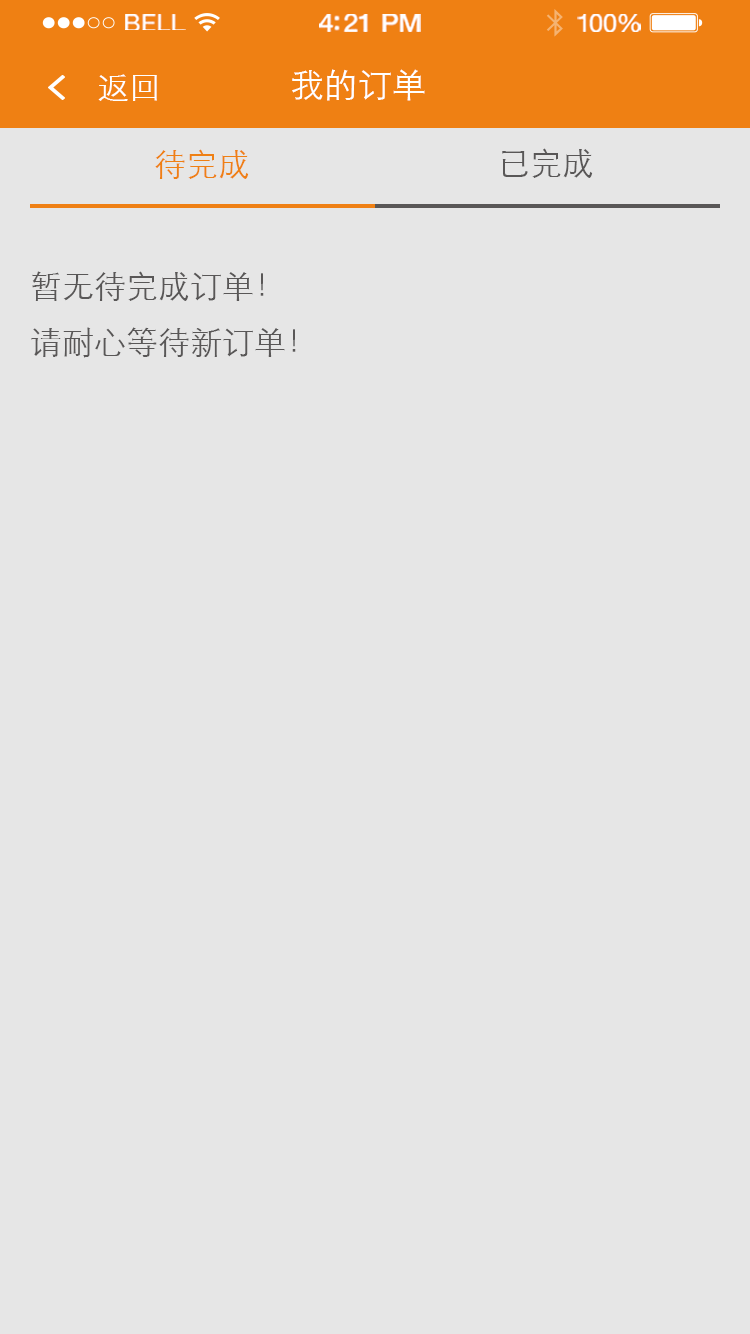
<style>
.page{position:relative;width:750px;height:1334px;background:#e6e6e6}
.page>*{position:absolute;margin:0}
.t1{font:23.3px "HelveticaNeue";letter-spacing:0.02em;color:#ffffff;scale:1.06 1}
.t2{font:25.3px "HelveticaNeue-Medium";letter-spacing:-0.02em;color:#ffffff;scale:1.06 1}
.t3{font:24.3px "HelveticaNeue";letter-spacing:-0.02em;color:#ffffff;scale:1.06 1}
.t4{font:32px "STXihei";color:#ffffff}
.t5{font:34px "STXihei";color:#ffffff}
.t6{font:32px "STXihei";color:#ef8014}
.t7{font:32px "STXihei";color:#595757}
.t8{font:32px/56px "STXihei";color:#595757}
</style>
<div class="page">
<p class="t1" style="left:125px;top:14px;width:61px;height:16px">BELL</p>
<p class="t2" style="left:319px;top:14px;width:102px;height:18px">4:21 PM</p>
<p class="t3" style="left:577px;top:14px;width:64px;height:18px">100%</p>
<p class="t4" style="left:98px;top:74px;width:59px;height:27px">返回</p>
<p class="t5" style="left:292px;top:69px;width:133px;height:32px">我的订单</p>
<p class="t6" style="left:155px;top:149px;width:94px;height:30px">待完成</p>
<p class="t7" style="left:502px;top:148px;width:91px;height:30px">已完成</p>
<p class="t8" style="left:31px;top:271px;width:265px;height:87px">暂无待完成订单！<br>请耐心等待新订单！</p>
</div>
